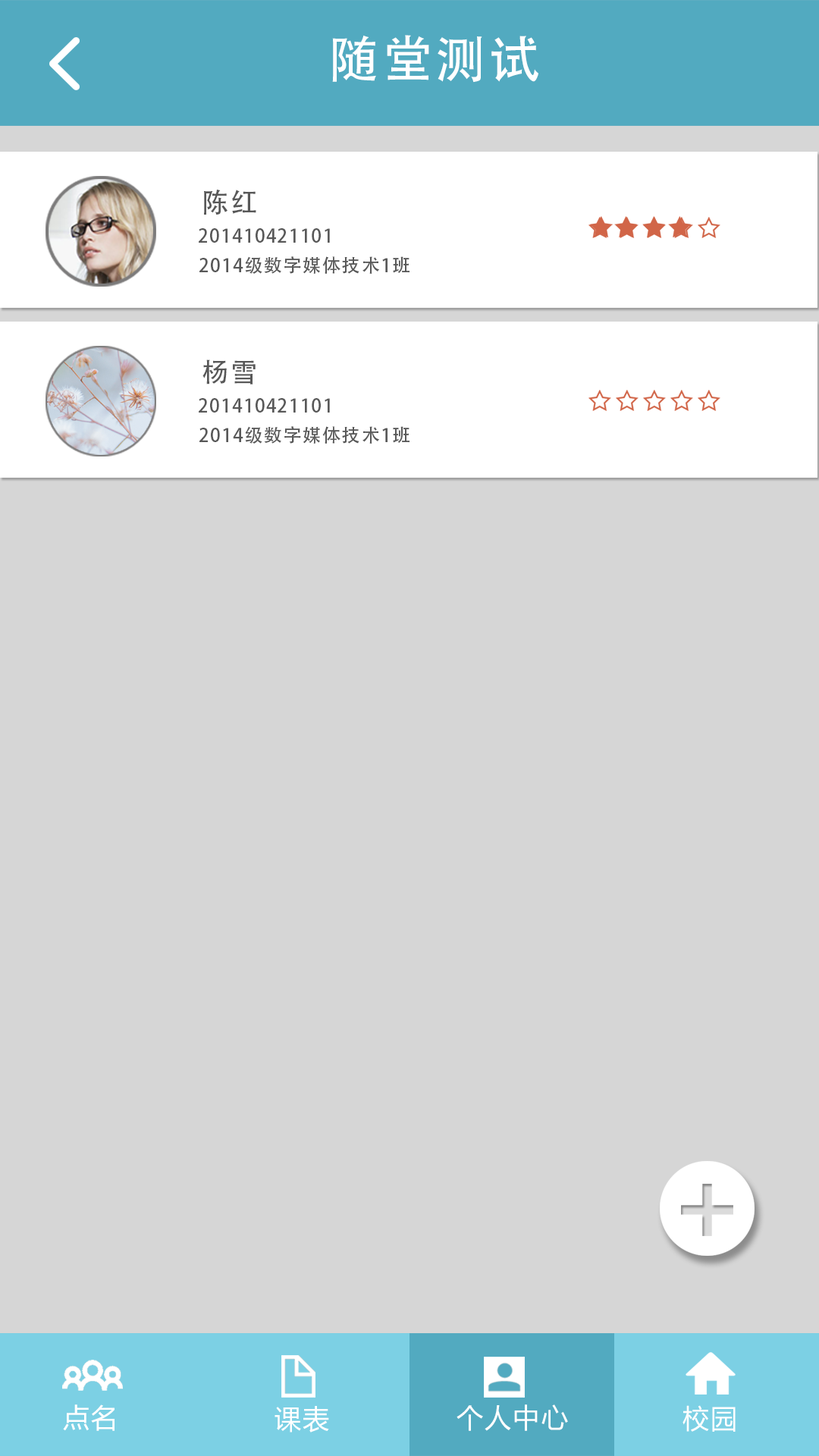
<style>
.page{position:relative;width:819px;height:1456px;background:#d6d6d6}
.page>*{position:absolute;margin:0}
.t1{font:50.8px "AdobeHeitiStd-Regular";letter-spacing:0.06em;color:#ffffff}
.t2{font:27.2px "AdobeHeitiStd-Regular";letter-spacing:0.06em;color:#585858}
.t3{font:18.6px "AdobeHeitiStd-Regular";letter-spacing:0.06em;color:#585858}
.t4{font:26.9px "MicrosoftYaHei";letter-spacing:0.06em;color:#ffffff}
</style>
<div class="page">
<p class="t1" style="left:332px;top:35px;width:206px;height:48px">随堂测试</p>
<p class="t2" style="left:204px;top:190px;width:52px;height:25px">陈红</p>
<p class="t3" style="left:199px;top:228px;width:131px;height:15px">201410421101</p>
<p class="t3" style="left:199px;top:256px;width:210px;height:18px">2014级数字媒体技术1班</p>
<p class="t2" style="left:202px;top:359px;width:54px;height:25px">杨雪</p>
<p class="t3" style="left:199px;top:398px;width:131px;height:15px">201410421101</p>
<p class="t3" style="left:199px;top:426px;width:210px;height:18px">2014级数字媒体技术1班</p>
<p class="t4" style="left:63px;top:1404px;width:52px;height:27px">点名</p>
<p class="t4" style="left:275px;top:1406px;width:54px;height:26px">课表</p>
<p class="t4" style="left:457px;top:1404px;width:111px;height:27px">个人中心</p>
<p class="t4" style="left:682px;top:1405px;width:54px;height:27px">校园</p>
</div>
